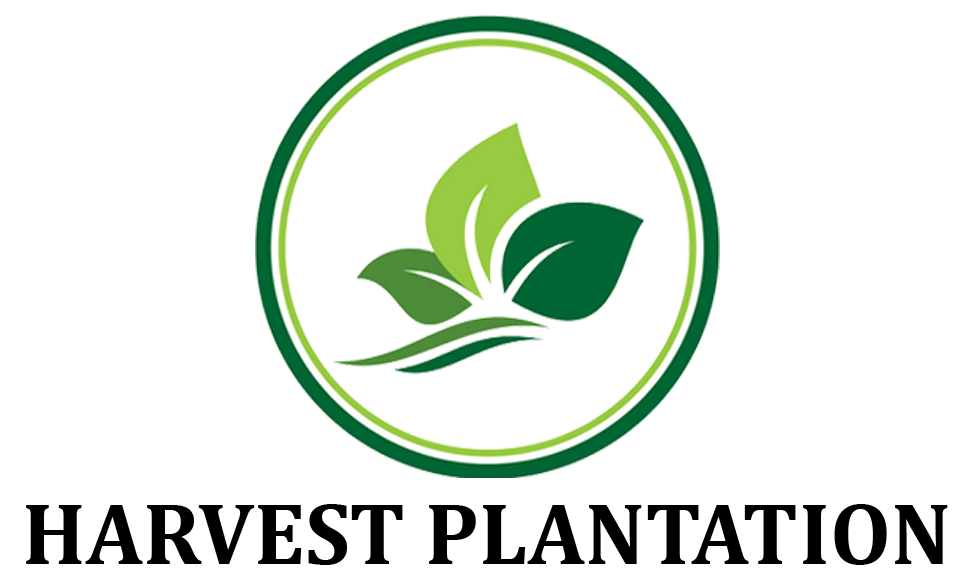
<style>
.page{position:relative;width:974px;height:586px;background:#ffffff}
.page>*{position:absolute;margin:0}
.t1{font:88.3px "Cambria-Bold";color:#000000}
</style>
<div class="page">
<p class="t1" style="left:26px;top:504px;width:922px;height:61px">HARVEST PLANTATION</p>
</div>
